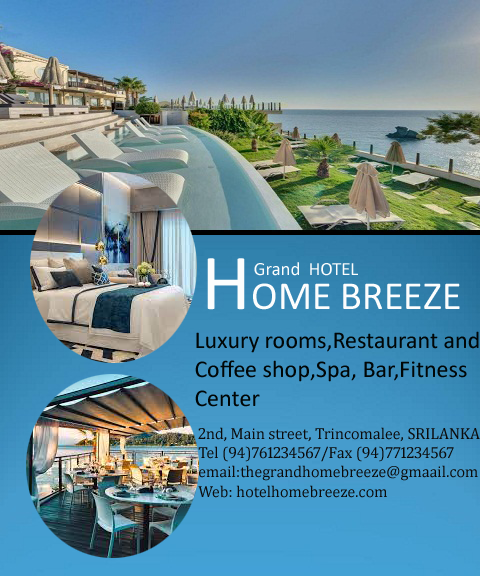
<style>
.page{position:relative;width:480px;height:576px}
.page>*{position:absolute;margin:0}
.t1{font:40px "Calibri";color:#fcfdfd}
.t2{font:80px "Calibri";color:#fcfdfd}
.t3{font:18.7px "Calibri";color:#fcfdfd}
.t4{font:16px "Cambria";color:#0c0b0b}
</style>
<div class="page">
<p class="t1" style="left:207px;top:258px;width:253px;height:52px"><span class="t2">H</span>OME BREEZE</p>
<p class="t3" style="left:254px;top:262px;width:104px;height:14px">Grand  HOTEL</p>
<p class="t4" style="left:198px;top:427px;width:282px;height:71px">2nd, Main street, Trincomalee, SRILANKA<br>Tel (94)761234567/Fax (94)771234567<br>email:thegrandhomebreeze@gmaail.com<br>Web: hotelhomebreeze.com</p>
</div>
